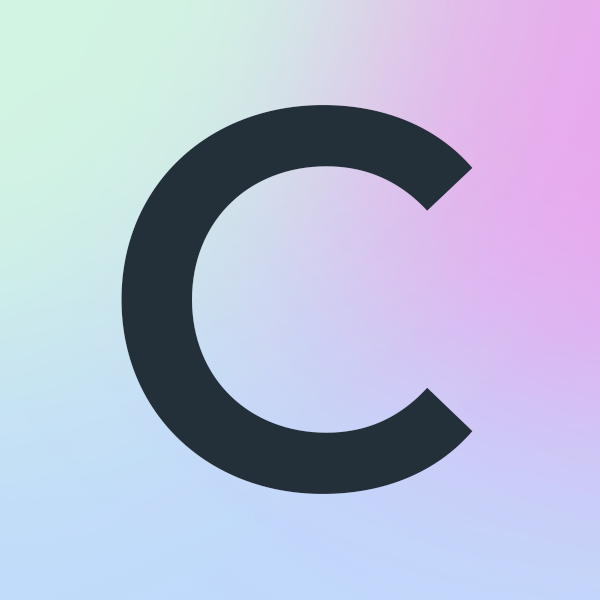
<style>
.page{position:relative;width:600px;height:600px}
.page>*{position:absolute;margin:0}
.t1{font:538.1px "Montserrat-SemiBold";color:#233039}
</style>
<div class="page">
<p class="t1" style="left:121px;top:105px;width:352px;height:389px">C</p>
</div>
